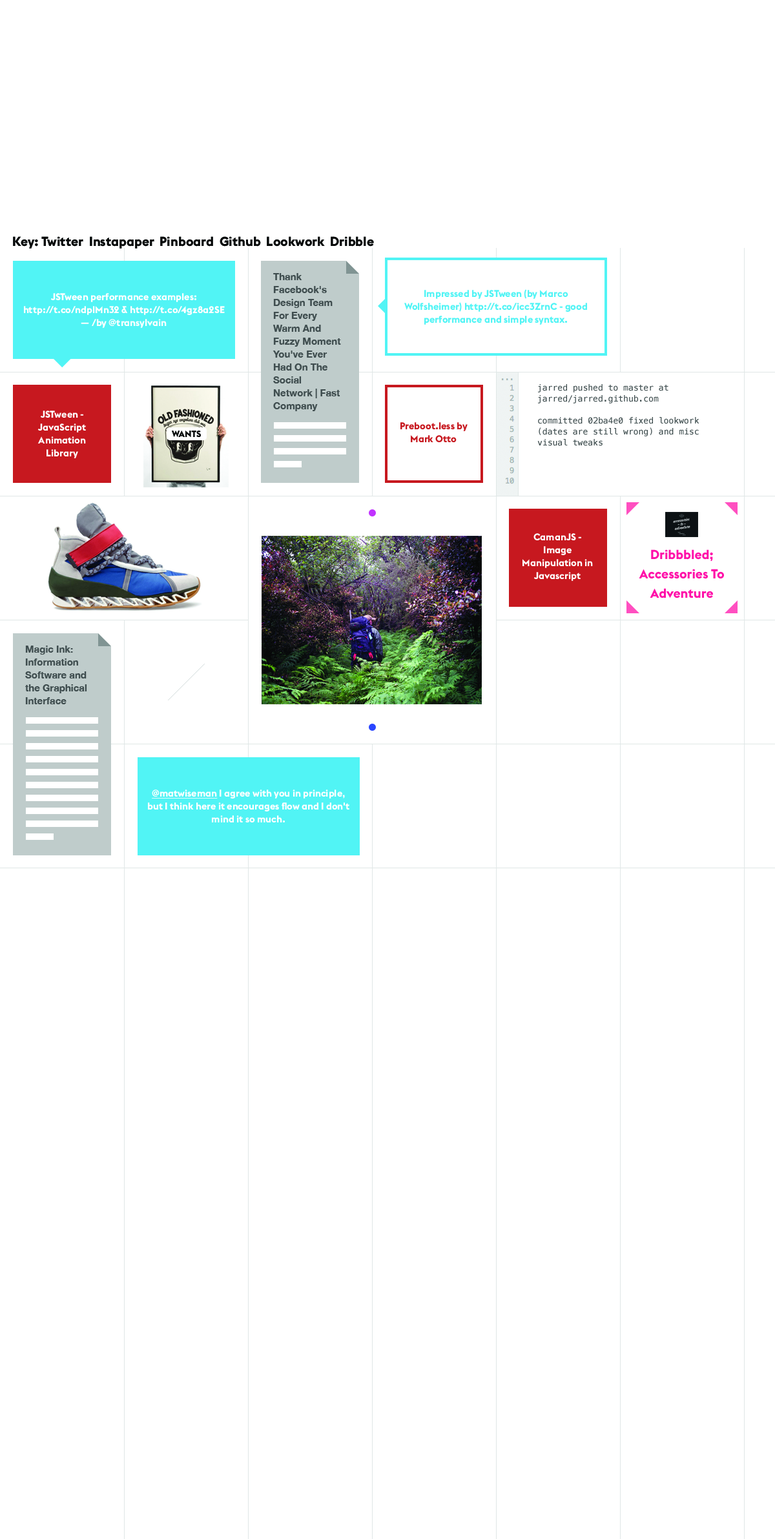
<style>
.page{position:relative;width:775px;height:1539px;background:#ffffff}
.page>*{position:absolute;margin:0}
.t1{font:12.9px "EuclidBP-Bold";color:#060808}
.t2{font:9.7px/12.9px "HelveticaNeue-Bold";color:#404e4f}
.t3{font:9.7px/12.9px "EuclidBP-Bold";color:#ffffff}
.t4{font:9.7px/12.9px "EuclidBP-Bold";color:#51f4f5}
.t5{font:8.4px/11px "Menlo-Regular";color:#404e4f}
.t6{font:9.7px/12.9px "EuclidBP-Bold";color:#c7181f}
.t7{font:9px "EuclidBP-Bold";color:#060808}
.t8{font:12.9px/19.4px "EuclidBP-Bold";color:#ff0fa9}
.t9{font:9.7px/12.9px "EuclidBP-Bold";color:#ffffff;text-decoration:underline}
</style>
<div class="page">
<p class="t1" style="left:13px;top:236px;width:361px;height:13px">Key: Twitter  Instapaper  Pinboard  Github  Lookwork  Dribble</p>
<p class="t2" style="left:272px;top:273px;width:69px;height:138px">Thank Facebook's Design Team For Every Warm And Fuzzy Moment You've Ever Had On The Social Network | Fast Company</p>
<p class="t3" style="left:24px;top:293px;width:201px;height:35px;text-align:center">JSTween performance examples: http://t.co/ndplMn32 &amp; http://t.co/4gz8a2SE — /by @transylvain</p>
<p class="t4" style="left:404px;top:289px;width:183px;height:36px;text-align:center">Impressed by JSTween (by Marco Wolfsheimer) http://t.co/icc3ZrnC - good performance and simple syntax.</p>
<p class="t5" style="left:537px;top:384px;width:162px;height:62px">jarred pushed to master at jarred/jarred.github.com<br><br>committed 02ba4e0 fixed lookwork (dates are still wrong) and misc visual tweaks</p>
<p class="t3" style="left:37px;top:411px;width:49px;height:47px;text-align:center">JSTween - JavaScript Animation Library</p>
<p class="t6" style="left:400px;top:422px;width:67px;height:20px;text-align:center">Preboot.less by Mark Otto</p>
<p class="t7" style="left:172px;top:431px;width:29px;height:6px">WANTS</p>
<p class="t3" style="left:522px;top:533px;width:71px;height:48px;text-align:center">CamanJS - Image Manipulation in Javascript</p>
<p class="t8" style="left:639px;top:549px;width:85px;height:49px;text-align:center">Dribbbled; Accessories To Adventure</p>
<p class="t2" style="left:25px;top:646px;width:62px;height:58px">Magic Ink: Information Software and the Graphical Interface</p>
<p class="t3" style="left:148px;top:790px;width:201px;height:33px;text-align:center"><span class="t9">@matwiseman</span> I agree with you in principle, but I think here it encourages flow and I don't mind it so much.</p>
</div>
